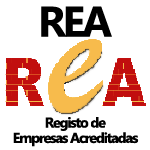
<style>
.page{position:relative;width:150px;height:150px;background:#ffffff}
.page>*{position:absolute;margin:0}
.t1{font:42.7px "SegoeUI-Bold";letter-spacing:-0.075em;color:#000000}
.t2{font:14.2px "SegoeUI-Bold";letter-spacing:-0.075em;color:#000000}
</style>
<div class="page">
<p class="t1" style="left:41px;top:6px;width:71px;height:31px">REA</p>
<p class="t2" style="left:45px;top:117px;width:61px;height:14px">Registo de</p>
<p class="t2" style="left:13px;top:132px;width:126px;height:15px">Empresas Acreditadas</p>
</div>
